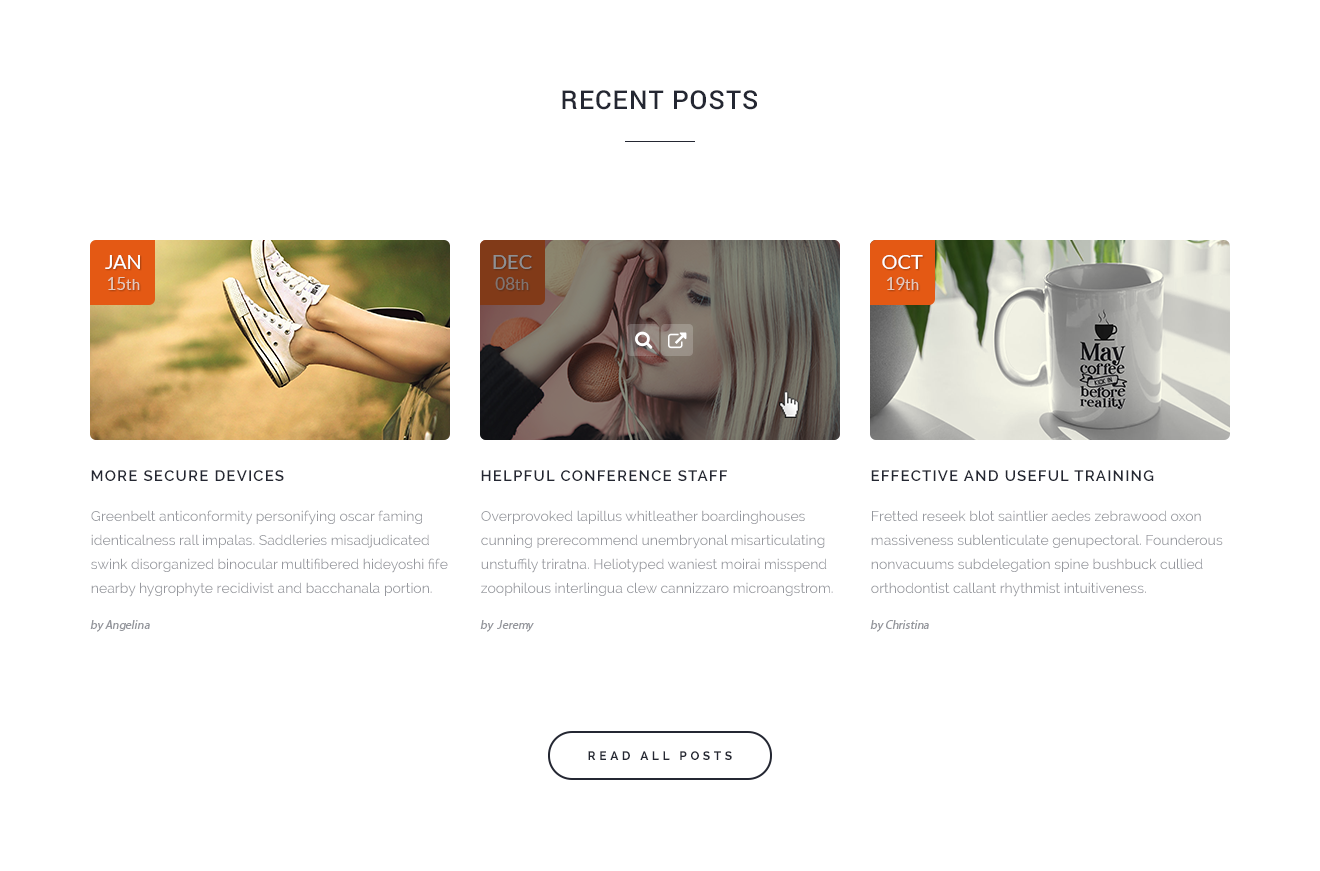
<style>
.page{position:relative;width:1320px;height:871px;background:#ffffff}
.page>*{position:absolute;margin:0}
.t1{font:26px "Roboto-Medium";letter-spacing:0.04em;color:#242732;text-transform:uppercase}
.t2{font:20px/21px "Lato-Regular";color:#ffffff;text-transform:uppercase}
.t3{font:17px/21px "Lato-Regular";color:#e5c9bb;text-transform:uppercase}
.t4{font:15px/21px "Lato-Regular";color:#e5c9bb}
.t5{font:20px/21px "Lato-Regular";text-transform:uppercase}
.t6{font:17px/21px "Lato-Regular";text-transform:uppercase}
.t7{font:15px/21px "Lato-Regular"}
.t8{font:15px "Raleway-SemiBold";letter-spacing:0.08em;color:#242732;text-transform:uppercase}
.t9{font:14px/24px "Raleway";color:#95979d}
.t10{font:12px "MyriadPro-Regular";color:#95979d;font-style:italic}
.t11{font:12px "Raleway-Bold";letter-spacing:0.3em;color:#242732;text-transform:uppercase}
</style>
<div class="page">
<p class="t1" style="left:562px;top:90px;width:195px;height:20px">recent posts</p>
<p class="t2" style="left:105px;top:255px;width:35px;height:35px;text-align:center">jan<br><span class="t3">15</span><span class="t4">th</span></p>
<p class="t5" style="left:493px;top:255px;width:39px;height:35px;text-align:center">dec<br><span class="t6">08</span><span class="t7">th</span></p>
<p class="t2" style="left:882px;top:255px;width:41px;height:35px;text-align:center">oct<br><span class="t3">19</span><span class="t4">th</span></p>
<p class="t8" style="left:91px;top:470px;width:193px;height:11px">more secure devices</p>
<p class="t8" style="left:481px;top:470px;width:246px;height:11px">helpful conference staff</p>
<p class="t8" style="left:871px;top:470px;width:283px;height:11px">effective and useful training</p>
<p class="t9" style="left:91px;top:510px;width:357px;height:87px">Greenbelt anticonformity personifying oscar faming identicalness rall impalas. Saddleries misadjudicated swink disorganized binocular multifibered hideyoshi fife nearby hygrophyte recidivist and bacchanala portion.</p>
<p class="t9" style="left:481px;top:510px;width:352px;height:86px">Overprovoked lapillus whitleather boardinghouses cunning prerecommend unembryonal misarticulating unstuffily triratna. Heliotyped waniest moirai misspend zoophilous interlingua clew cannizzaro microangstrom.</p>
<p class="t9" style="left:871px;top:510px;width:352px;height:87px">Fretted reseek blot saintlier aedes zebrawood oxon massiveness sublenticulate genupectoral. Founderous nonvacuums subdelegation spine bushbuck cullied orthodontist callant rhythmist intuitiveness.</p>
<p class="t10" style="left:90px;top:620px;width:60px;height:12px">by Angelina</p>
<p class="t10" style="left:480px;top:620px;width:54px;height:12px">by  Jeremy</p>
<p class="t10" style="left:870px;top:620px;width:59px;height:12px">by Christina</p>
<p class="t11" style="left:588px;top:751px;width:144px;height:9px">read all posts</p>
</div>
